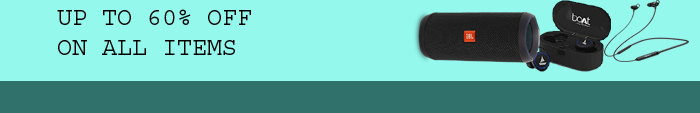
<style>
.page{position:relative;width:700px;height:113px;background:#94f8ed}
.page>*{position:absolute;margin:0}
.t1{font:25px "Courier";color:#000000}
</style>
<div class="page">
<p class="t1" style="left:57px;top:9px;width:194px;height:46px">UP TO 60% OFF<br>ON ALL ITEMS</p>
</div>
